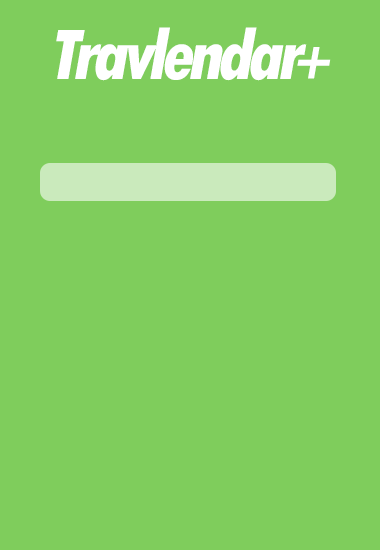
<style>
.page{position:relative;width:380px;height:550px;background:#7fcd5c}
.page>*{position:absolute;margin:0}
.t1{font:75px "TwCenMT-CondensedExtraBold";letter-spacing:-0.075em;color:#ffffff;font-style:italic}
.t2{font:58.3px "TwCenMT-CondensedExtraBold";letter-spacing:-0.075em;color:#ffffff;font-style:italic}
</style>
<div class="page">
<p class="t1" style="left:56px;top:27px;width:251px;height:54px">Travlendar</p>
<p class="t2" style="left:297px;top:47px;width:34px;height:32px">+</p>
</div>
